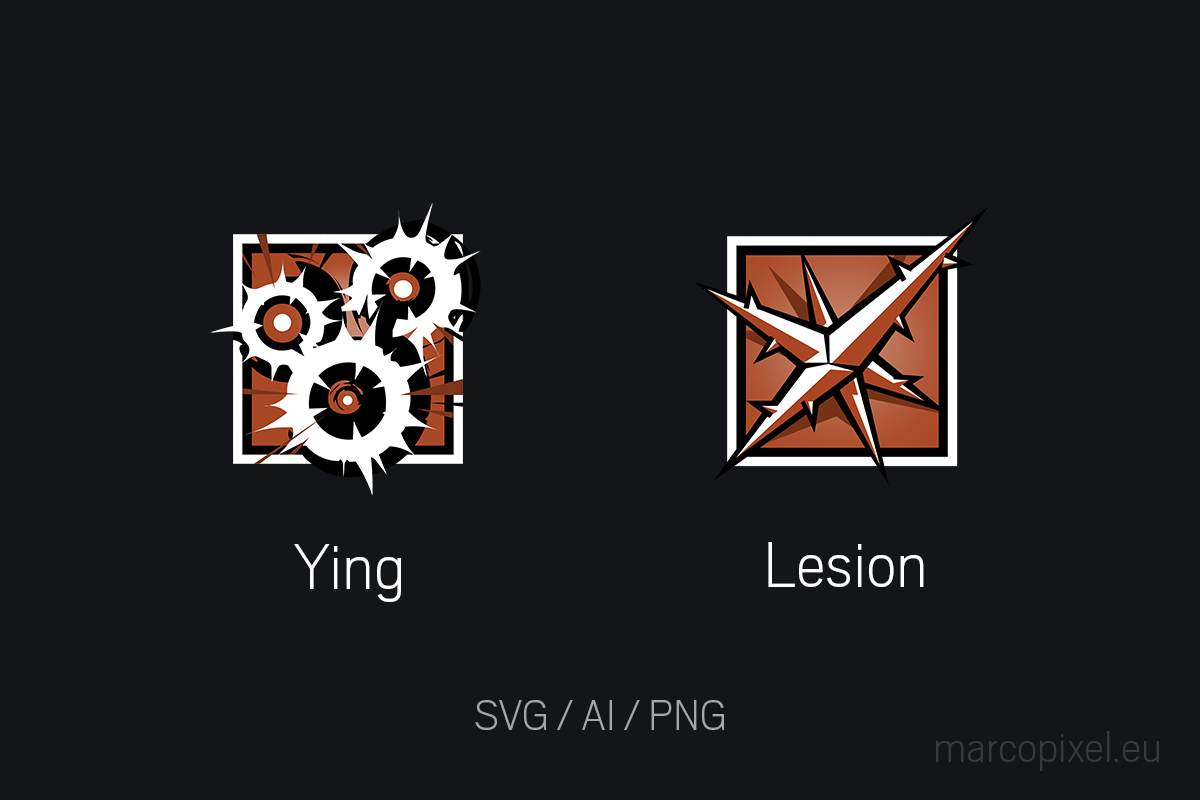
<style>
.page{position:relative;width:1200px;height:800px;background:#141518}
.page>*{position:absolute;margin:0}
.t1{font:72px "Scout-ExtraLight";color:#ffffff}
.t2{font:48px "Scout-ExtraLight";color:#a7a7a8}
.t3{font:48px "Scout-ExtraLight";color:#38393b}
</style>
<div class="page">
<p class="t1" style="left:294px;top:544px;width:107px;height:58px">Ying</p>
<p class="t1" style="left:768px;top:542px;width:156px;height:45px">Lesion</p>
<p class="t2" style="left:475px;top:700px;width:249px;height:30px">SVG / AI / PNG</p>
<p class="t3" style="left:936px;top:731px;width:223px;height:40px">marcopixel.eu</p>
</div>
